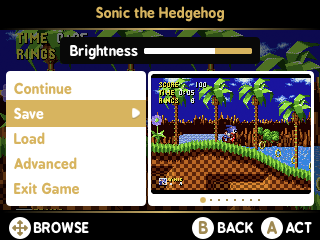
<style>
.page{position:relative;width:320px;height:240px;background:#ffffff}
.page>*{position:absolute;margin:0}
.t1{font:14px "BPreplay-Bold";color:#d7b45f}
.t2{font:14px "BPreplay-Bold";color:#ffffff}
.t3{font:14px/25px "BPreplay-Bold";color:#d7b45f}
.t4{font:14px/25px "BPreplay-Bold";color:#ffffff}
.t5{font:16px "BPreplay-Bold";color:#9f8952}
</style>
<div class="page">
<p class="t1" style="left:96px;top:6px;width:128px;height:16px">Sonic the Hedgehog</p>
<p class="t2" style="left:70px;top:44px;width:68px;height:16px">Brightness</p>
<p class="t3" style="left:14px;top:82px;width:65px;height:113px">Continue<br><span class="t4">Save<br></span>Load<br>Advanced<br>Exit Game</p>
<p class="t2" style="left:33px;top:221px;width:56px;height:13px">BROWSE</p>
<p class="t5" style="left:198px;top:221px;width:10px;height:13px">B</p>
<p class="t2" style="left:217px;top:221px;width:36px;height:13px">BACK</p>
<p class="t5" style="left:267px;top:221px;width:10px;height:13px">A</p>
<p class="t2" style="left:286px;top:221px;width:26px;height:13px">ACT</p>
</div>
